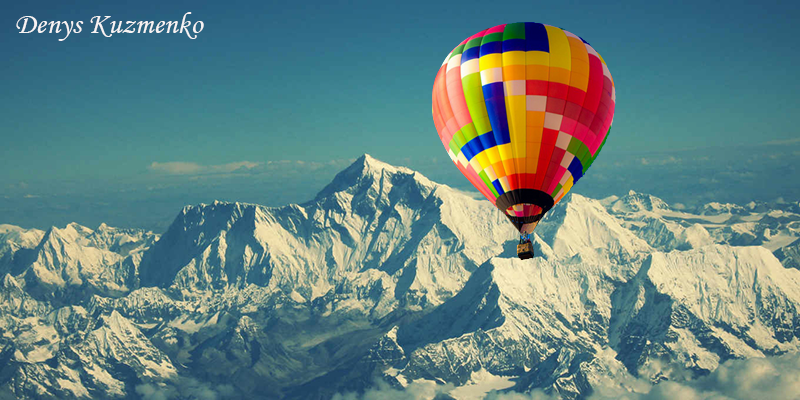
<style>
.page{position:relative;width:800px;height:400px}
.page>*{position:absolute;margin:0}
.t1{font:30px "MonotypeCorsiva";color:#f8f3f3}
</style>
<div class="page">
<p class="t1" style="left:16px;top:12px;width:188px;height:29px">Denys Kuzmenko</p>
</div>
